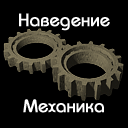
<style>
.page{position:relative;width:128px;height:128px;background:#000000}
.page>*{position:absolute;margin:0}
.t1{font:18px "BauhausC-Medium";color:#ffffff;font-weight:bold}
</style>
<div class="page">
<p class="t1" style="left:19px;top:13px;width:91px;height:18px">Наведение</p>
<p class="t1" style="left:23px;top:99px;width:81px;height:14px">Механика</p>
</div>
